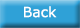
<style>
.page{position:relative;width:80px;height:28px;background:#2fa1d7}
.page>*{position:absolute;margin:0}
.t1{font:14px "Verdana";color:#ffffff}
</style>
<div class="page">
<p class="t1" style="left:24px;top:6px;width:33px;height:12px">Back</p>
</div>
